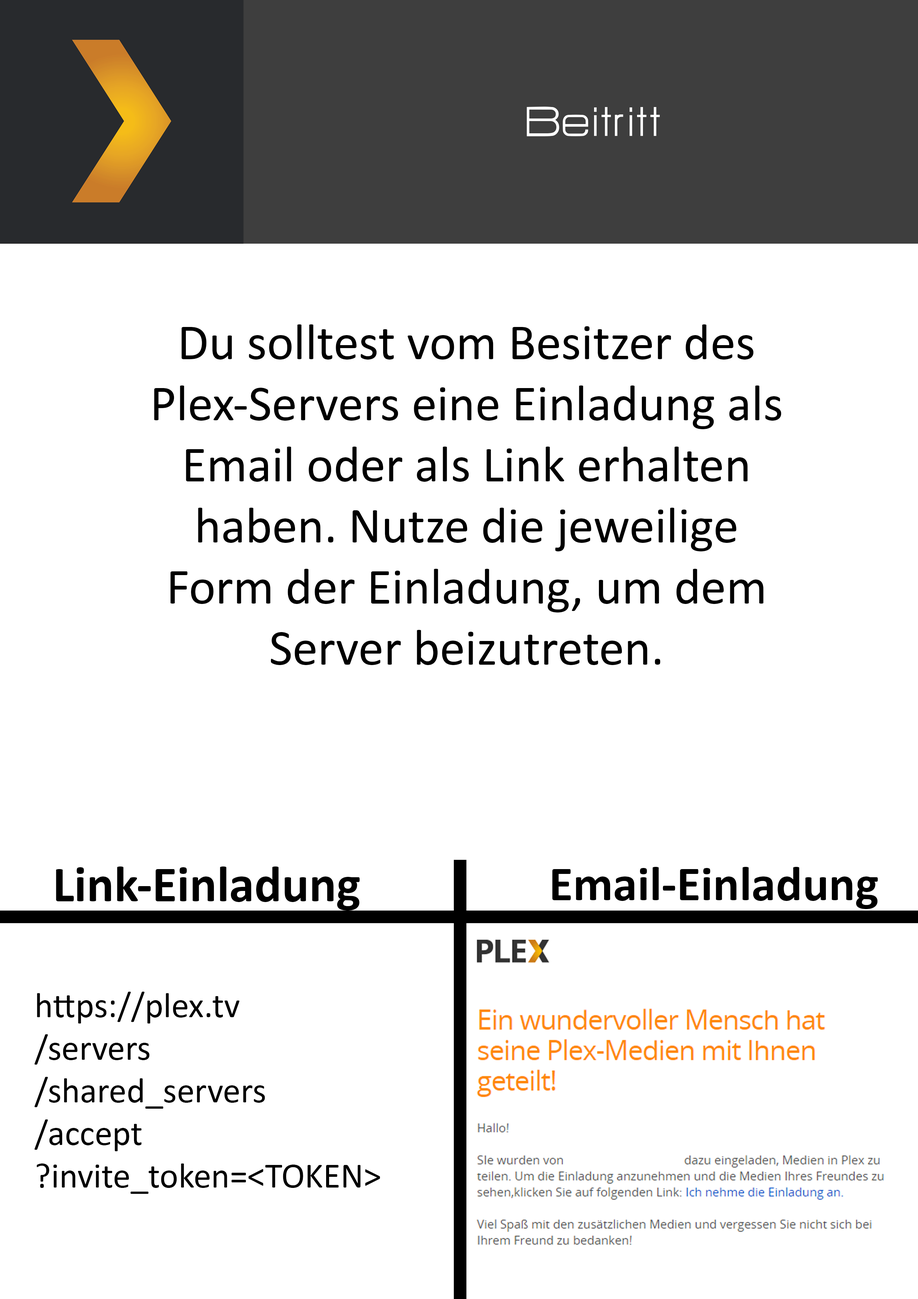
<style>
.page{position:relative;width:918px;height:1299px;background:#ffffff}
.page>*{position:absolute;margin:0}
.t1{font:50.9px "HURTMOLDPersonalUse-Regular";color:#ffffff}
.t2{font:50.9px "Calibri";color:#000000}
.t3{font:50.9px "Calibri-Bold";color:#000000}
.t4{font:49.4px "Calibri-Bold";color:#000000}
.t5{font:35.5px "Calibri";color:#000000}
</style>
<div class="page">
<p class="t1" style="left:527px;top:107px;width:133px;height:29px">Beitritt</p>
<p class="t2" style="left:154px;top:324px;width:628px;height:341px;text-align:center">Du solltest vom Besitzer des<br>Plex-Servers eine Einladung als<br>Email oder als Link erhalten<br>haben. Nutze die jeweilige<br>Form der Einladung, um dem<br>Server beizutreten.</p>
<p class="t3" style="left:56px;top:866px;width:304px;height:44px">Link-Einladung</p>
<p class="t4" style="left:552px;top:867px;width:326px;height:42px">Email-Einladung</p>
<p class="t5" style="left:34px;top:991px;width:346px;height:203px">https://plex.tv<br>/servers<br>/shared_servers<br>/accept<br>?invite_token=&lt;TOKEN&gt;</p>
</div>
